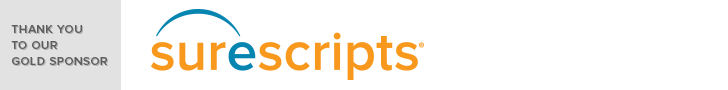
<style>
.page{position:relative;width:728px;height:90px;background:#ffffff}
.page>*{position:absolute;margin:0}
.t1{font:14px/16px "ProximaNova-Semibold";letter-spacing:0.015em;color:#5d5d5d;font-variant:small-caps}
</style>
<div class="page">
<p class="t1" style="left:11px;top:25px;width:96px;height:40px">thank you<br>to our <br>gold sponsor</p>
</div>
